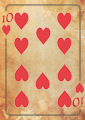
<style>
.page{position:relative;width:85px;height:120px}
.page>*{position:absolute;margin:0}
.t1{font:13px "Quintessential-Regular";color:#cc3333}
</style>
<div class="page">
<p class="t1" style="left:2px;top:13px;width:11px;height:10px">10</p>
<p class="t1" style="left:72px;top:97px;width:12px;height:10px;rotate:180deg">10</p>
</div>
